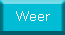
<style>
.page{position:relative;width:65px;height:35px;background:#00bcd4}
.page>*{position:absolute;margin:0}
.t1{font:14px "MicrosoftSansSerif";color:#ffffff}
</style>
<div class="page">
<p class="t1" style="left:16px;top:11px;width:34px;height:10px">Weer</p>
</div>
